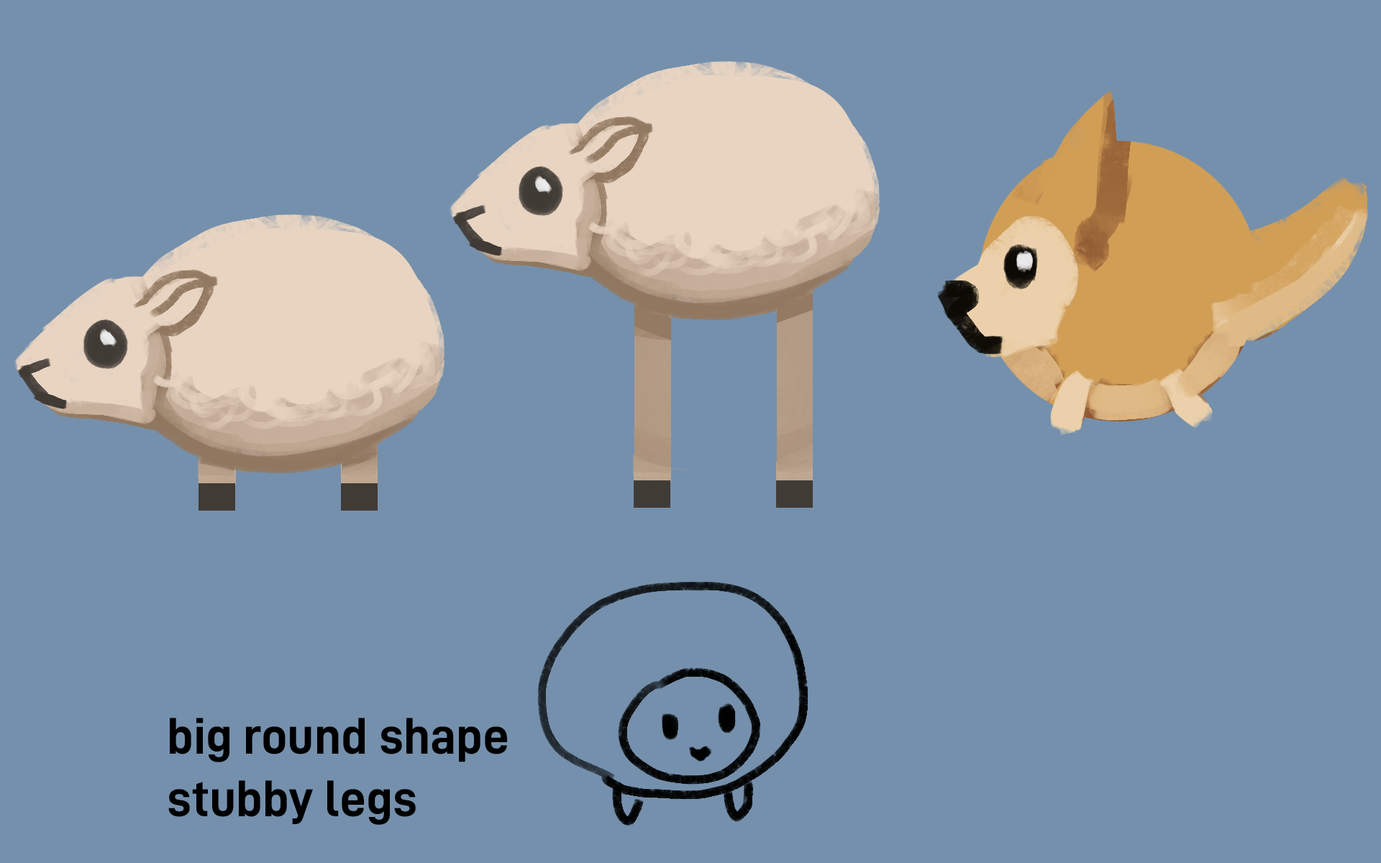
<style>
.page{position:relative;width:1381px;height:863px;background:#7590ac}
.page>*{position:absolute;margin:0}
.t1{font:51.8px "D-DIN-Bold";color:#000000}
</style>
<div class="page">
<p class="t1" style="left:168px;top:718px;width:339px;height:107px">big round shape<br>stubby legs</p>
</div>
